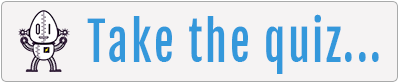
<style>
.page{position:relative;width:399px;height:83px;background:#f5f3f3}
.page>*{position:absolute;margin:0}
.t1{font:52.3px "FjallaOne-Regular";letter-spacing:0.055em;color:#3498db;scale:0.85 1}
</style>
<div class="page">
<p class="t1" style="left:87px;top:14px;width:292px;height:60px">Take the quiz...</p>
</div>
